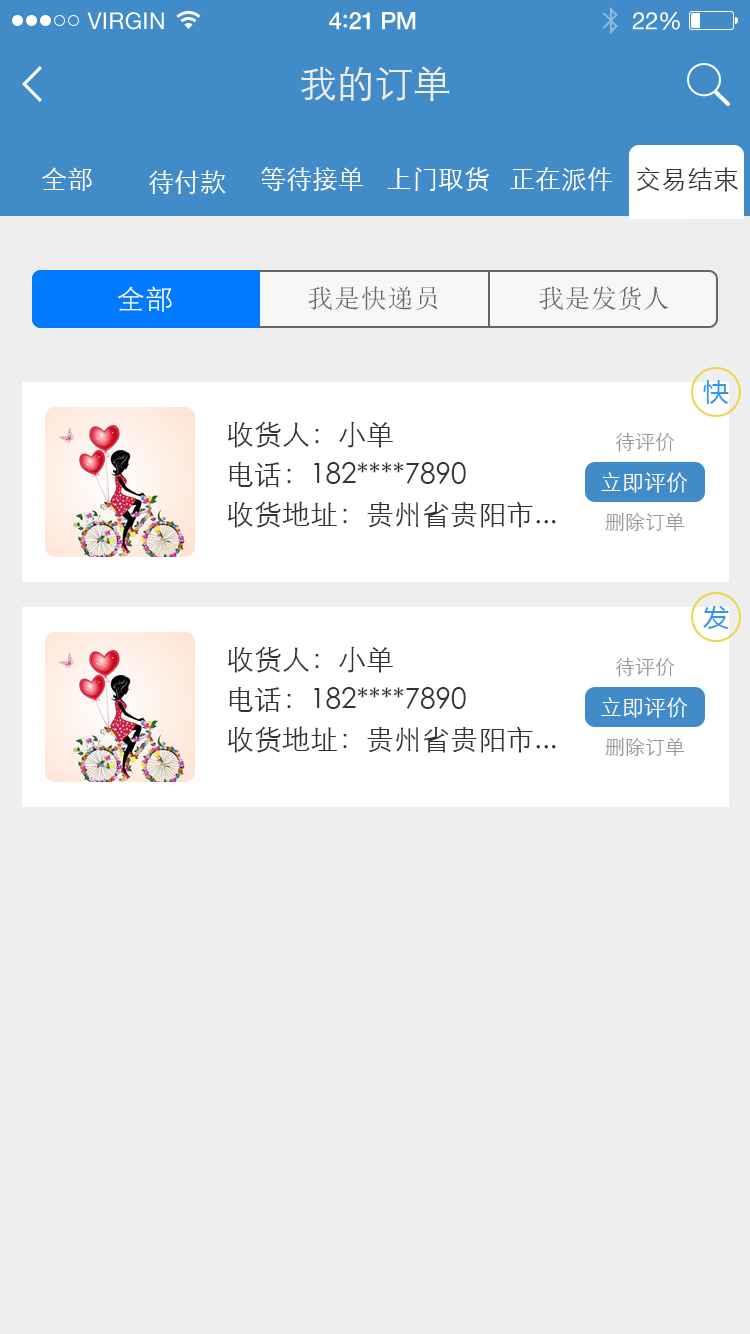
<style>
.page{position:relative;width:750px;height:1334px;background:#eeeeee}
.page>*{position:absolute;margin:0}
.t1{font:23px "HelveticaNeue";letter-spacing:0.02em;color:#ffffff}
.t2{font:24px "HelveticaNeue-Medium";letter-spacing:-0.02em;color:#ffffff}
.t3{font:26px "Avenir-Medium";letter-spacing:-0.02em;color:#ffffff}
.t4{font:24px "HelveticaNeue";letter-spacing:-0.02em;color:#ffffff}
.t5{font:38px "STXihei";color:#eeeeee}
.t6{font:26px "STXihei";color:#ffffff}
.t7{font:26px "STXihei";color:#333333}
.t8{font:28px "STXihei";letter-spacing:0.02em;color:#ffffff}
.t9{font:26px "SimSun";letter-spacing:0.03em;color:#666666}
.t10{font:26px "SimSun";letter-spacing:0.01em;color:#666666}
.t11{font:26px "MicrosoftYaHei";color:#2e97ee}
.t12{font:28px/40px "STXihei";color:#333333}
.t13{font:20px "STXihei";color:#999999}
.t14{font:22px "STXihei";color:#ffffff}
</style>
<div class="page">
<p class="t1" style="left:87px;top:12px;width:77px;height:18px">VIRGIN</p>
<p class="t2" style="left:329px;top:12px;width:87px;height:18px">4<span class="t3">:</span>21 PM</p>
<p class="t4" style="left:632px;top:12px;width:48px;height:18px">22%</p>
<p class="t5" style="left:301px;top:66px;width:149px;height:35px">我的订单</p>
<p class="t6" style="left:42px;top:167px;width:50px;height:24px">全部</p>
<p class="t6" style="left:149px;top:170px;width:77px;height:24px">待付款</p>
<p class="t6" style="left:261px;top:167px;width:102px;height:24px">等待接单</p>
<p class="t6" style="left:387px;top:167px;width:102px;height:24px">上门取货</p>
<p class="t6" style="left:510px;top:167px;width:102px;height:24px">正在派件</p>
<p class="t7" style="left:636px;top:167px;width:102px;height:25px">交易结束</p>
<p class="t8" style="left:117px;top:286px;width:55px;height:26px">全部</p>
<p class="t9" style="left:308px;top:286px;width:129px;height:24px">我是快递员</p>
<p class="t10" style="left:539px;top:286px;width:130px;height:25px">我是发货人</p>
<p class="t11" style="left:703px;top:380px;width:26px;height:24px">快</p>
<p class="t12" style="left:227px;top:421px;width:329px;height:107px">收货人：小单<br>电话：182****7890<br>收货地址：贵州省贵阳市...</p>
<p class="t13" style="left:615px;top:433px;width:60px;height:19px">待评价</p>
<p class="t14" style="left:601px;top:472px;width:86px;height:21px">立即评价</p>
<p class="t13" style="left:605px;top:512px;width:80px;height:19px">删除订单</p>
<p class="t11" style="left:703px;top:606px;width:26px;height:23px">发</p>
<p class="t12" style="left:227px;top:646px;width:329px;height:107px">收货人：小单<br>电话：182****7890<br>收货地址：贵州省贵阳市...</p>
<p class="t13" style="left:615px;top:658px;width:60px;height:19px">待评价</p>
<p class="t14" style="left:601px;top:697px;width:86px;height:21px">立即评价</p>
<p class="t13" style="left:605px;top:737px;width:80px;height:19px">删除订单</p>
</div>
